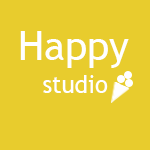
<style>
.page{position:relative;width:150px;height:150px;background:#e8cc2d}
.page>*{position:absolute;margin:0}
.t1{font:40px "TrebuchetMS";color:#ffffff}
.t2{font:24px "TrebuchetMS";color:#ffffff}
</style>
<div class="page">
<p class="t1" style="left:20px;top:31px;width:109px;height:37px">Happy</p>
<p class="t2" style="left:43px;top:75px;width:65px;height:18px">studio</p>
</div>
